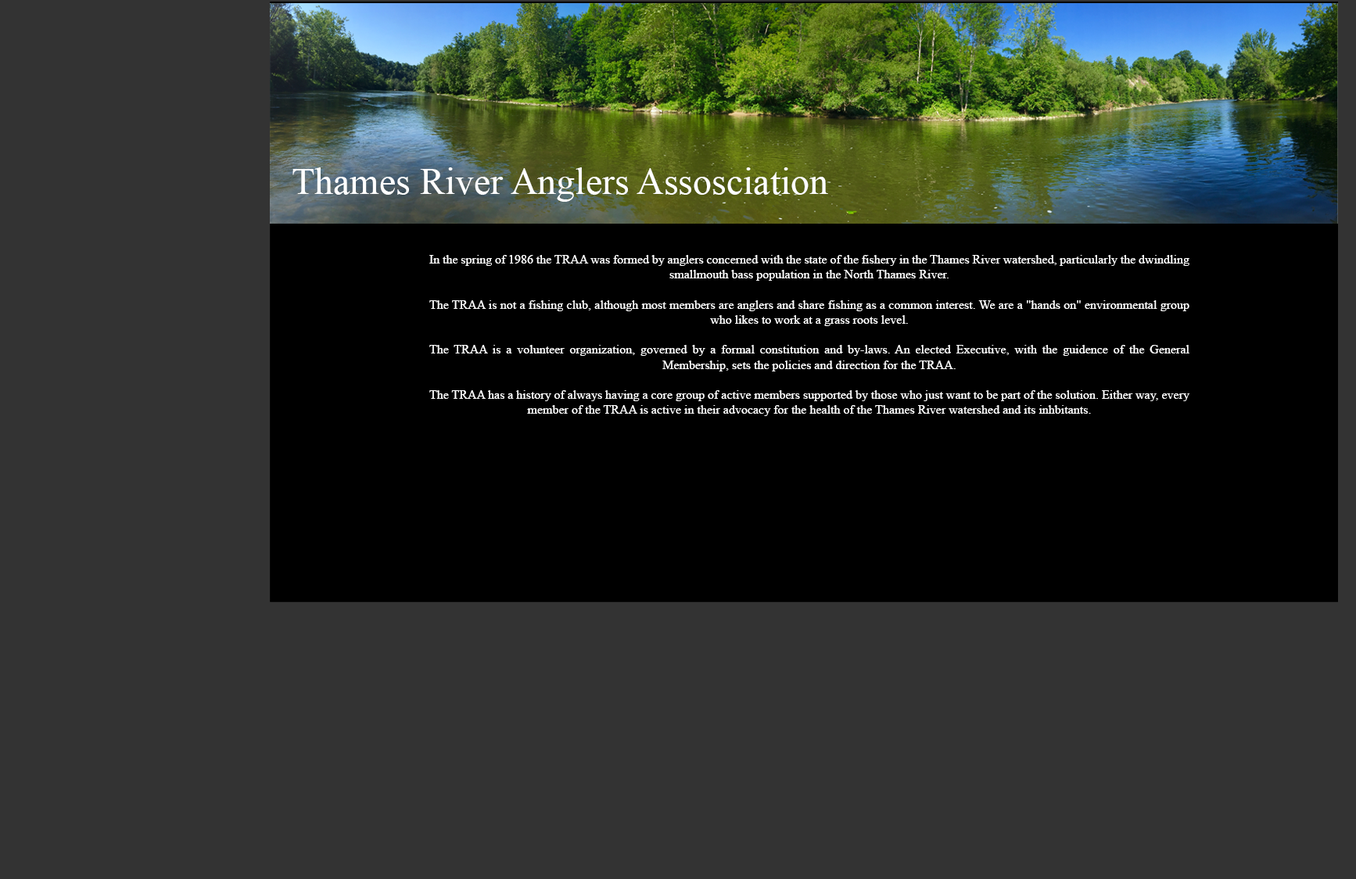
<style>
.page{position:relative;width:1356px;height:879px;background:#333333}
.page>*{position:absolute;margin:0}
.t1{font:37.5px "TimesNewRomanPSMT";color:#ffffff}
.t2{font:12.5px "TimesNewRomanPSMT";color:#ffffff}
</style>
<div class="page">
<p class="t1" style="left:293px;top:167px;width:535px;height:35px">Thames River Anglers Assosciation</p>
<p class="t2" style="left:429px;top:255px;width:761px;height:161px;text-align:justify">In the spring of 1986 the TRAA was formed by anglers concerned with the state of the fishery in the Thames River watershed, particularly the dwindling smallmouth bass population in the North Thames River.<br><br>The TRAA is not a fishing club, although most members are anglers and share fishing as a common interest. We are a "hands on" environmental group who likes to work at a grass roots level.<br><br>The TRAA is a volunteer organization, governed by a formal constitution and by-laws. An elected Executive, with the guidence of the General Membership, sets the policies and direction for the TRAA.<br><br>The TRAA has a history of always having a core group of active members supported by those who just want to be part of the solution. Either way, every member of the TRAA is active in their advocacy for the health of the Thames River watershed and its inhbitants.</p>
</div>
